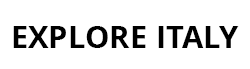
<style>
.page{position:relative;width:250px;height:69px;background:#ffffff}
.page>*{position:absolute;margin:0}
.t1{font:33.3px "Khula-Bold";color:#000000}
</style>
<div class="page">
<p class="t1" style="left:13px;top:26px;width:226px;height:22px">EXPLORE ITALY</p>
</div>
